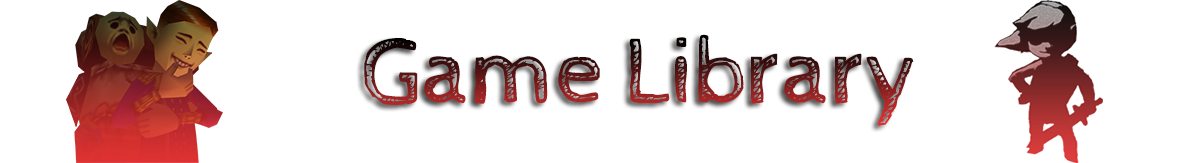
<style>
.page{position:relative;width:1177px;height:163px;background:#ffffff}
.page>*{position:absolute;margin:0}
.t1{font:95.7px "CabinSketch-Regular"}
</style>
<div class="page">
<p class="t1" style="left:364px;top:34px;width:550px;height:92px">Game Library</p>
</div>
